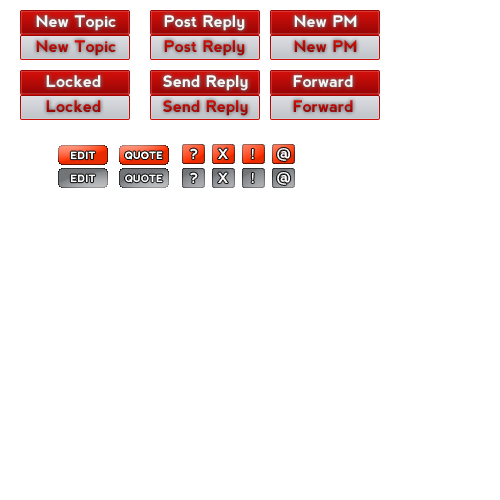
<style>
.page{position:relative;width:500px;height:500px;background:#ffffff}
.page>*{position:absolute;margin:0}
.t1{font:16px "nevis-Bold";color:#f7f7f7}
.t2{font:16px "nevis-Bold";color:#f6f6f6}
.t3{font:16px "nevis-Bold";color:#b60a08}
.t4{font:16px "nevis-Bold";color:#b40a08}
.t5{font:16px "nevis-Bold";color:#f3f3f3}
.t6{font:16px "nevis-Bold";color:#f4f4f4}
.t7{font:16px "nevis-Bold";color:#ab0806}
.t8{font:16px "nevis-Bold";color:#ae0907}
.t9{font:14px "nevis-Bold";letter-spacing:0.01em;color:#ffffff}
.t10{font:10px "nevis-Bold";letter-spacing:0.01em;color:#ffffff}
</style>
<div class="page">
<p class="t1" style="left:36px;top:15px;width:80px;height:16px">New Topic</p>
<p class="t1" style="left:164px;top:15px;width:81px;height:16px">Post Reply</p>
<p class="t2" style="left:294px;top:15px;width:63px;height:12px">New PM</p>
<p class="t3" style="left:36px;top:40px;width:80px;height:16px">New Topic</p>
<p class="t3" style="left:164px;top:40px;width:81px;height:16px">Post Reply</p>
<p class="t4" style="left:294px;top:40px;width:63px;height:12px">New PM</p>
<p class="t5" style="left:46px;top:75px;width:55px;height:12px">Locked</p>
<p class="t1" style="left:163px;top:75px;width:85px;height:16px">Send Reply</p>
<p class="t6" style="left:293px;top:75px;width:60px;height:12px">Forward</p>
<p class="t7" style="left:46px;top:100px;width:55px;height:12px">Locked</p>
<p class="t3" style="left:163px;top:100px;width:85px;height:16px">Send Reply</p>
<p class="t8" style="left:293px;top:100px;width:60px;height:12px">Forward</p>
<p class="t9" style="left:190px;top:148px;width:8px;height:11px">?</p>
<p class="t9" style="left:218px;top:148px;width:10px;height:12px">X</p>
<p class="t9" style="left:251px;top:149px;width:3px;height:10px">!</p>
<p class="t9" style="left:277px;top:147px;width:14px;height:14px">@</p>
<p class="t10" style="left:70px;top:151px;width:26px;height:9px">EDIT</p>
<p class="t10" style="left:125px;top:151px;width:38px;height:9px">QUOTE</p>
<p class="t10" style="left:70px;top:174px;width:26px;height:9px">EDIT</p>
<p class="t10" style="left:125px;top:174px;width:38px;height:9px">QUOTE</p>
<p class="t9" style="left:190px;top:172px;width:8px;height:11px">?</p>
<p class="t9" style="left:218px;top:172px;width:10px;height:12px">X</p>
<p class="t9" style="left:251px;top:173px;width:3px;height:10px">!</p>
<p class="t9" style="left:277px;top:171px;width:14px;height:14px">@</p>
</div>
